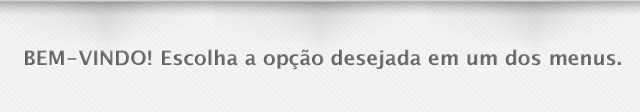
<style>
.page{position:relative;width:640px;height:112px;background:#f4f4f4}
.page>*{position:absolute;margin:0}
.t1{font:19.9px "LucidaGrande-Bold";color:#5d5d5d;text-transform:uppercase}
.t2{font:19.9px "LucidaGrande-Bold";color:#5d5d5d}
</style>
<div class="page">
<p class="t1" style="left:25px;top:50px;width:127px;height:16px">Bem-vindo!</p>
<p class="t2" style="left:162px;top:49px;width:459px;height:21px">Escolha a opção desejada em um dos menus.</p>
</div>
